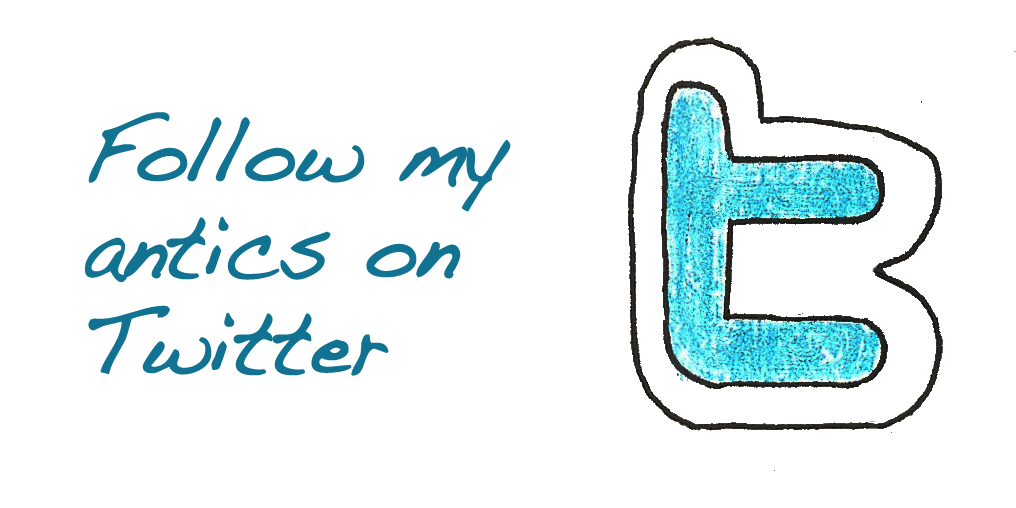
<style>
.page{position:relative;width:1016px;height:508px;background:#ffffff}
.page>*{position:absolute;margin:0}
.t1{font:88px "Handwriting-Dakota";letter-spacing:-0.01em;color:#127292;font-weight:bold;scale:0.91 1}
</style>
<div class="page">
<p class="t1" style="left:85px;top:112px;width:426px;height:264px">Follow my<br>antics on<br>Twitter</p>
</div>
